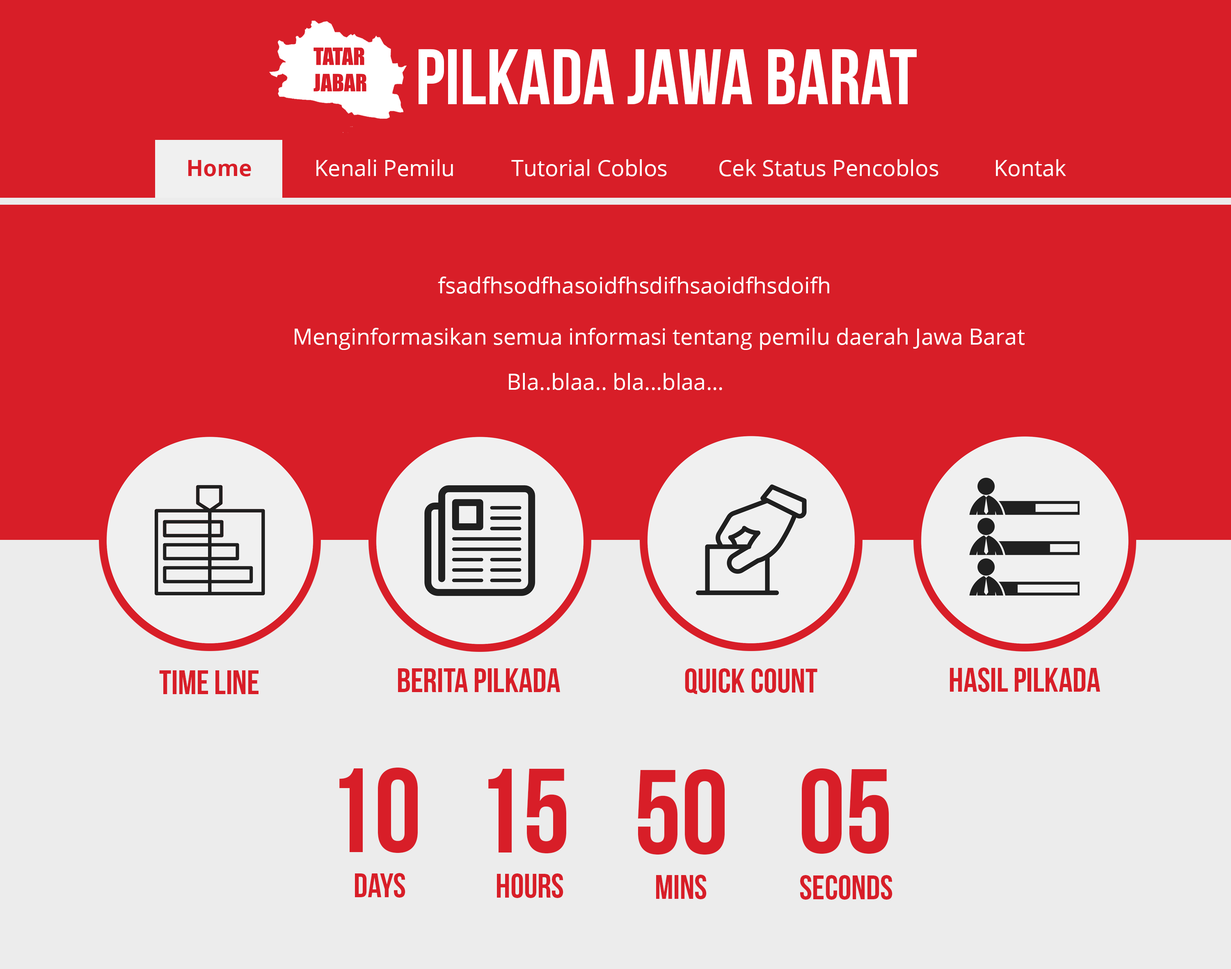
<style>
.page{position:relative;width:1231px;height:969px;background:#d81e28}
.page>*{position:absolute;margin:0}
.t1{font:78.6px "BebasNeue";color:#ffffff}
.t2{font:22.2px "OpenSans-Regular";color:#ffffff}
.t3{font:22.2px "OpenSans-Bold";color:#d81e28}
.t4{font:34.2px "BebasNeue";color:#d81e28}
.t5{font:119.6px "BebasNeue";color:#d81e28}
</style>
<div class="page">
<p class="t1" style="left:418px;top:49px;width:498px;height:56px">pilkada jawa barat</p>
<p class="t2" style="left:188px;top:159px;width:878px;height:17px"><span class="t3">Home       </span>Kenali Pemilu      Tutorial Coblos      Cek Status Pencoblos      Kontak</p>
<p class="t2" style="left:438px;top:276px;width:391px;height:18px">fsadfhsodfhasoidfhsdifhsaoidfhsdoifh</p>
<p class="t2" style="left:295px;top:328px;width:729px;height:22px">Menginformasikan semua informasi tentang pemilu daerah Jawa Barat</p>
<p class="t2" style="left:509px;top:373px;width:213px;height:17px">Bla..blaa.. bla...blaa...</p>
<p class="t4" style="left:159px;top:670px;width:99px;height:24px">Time Line</p>
<p class="t4" style="left:398px;top:668px;width:162px;height:24px">Berita pilkada</p>
<p class="t4" style="left:685px;top:668px;width:132px;height:26px">quick count</p>
<p class="t4" style="left:950px;top:667px;width:150px;height:25px">hasil pilkada</p>
<p class="t5" style="left:339px;top:767px;width:79px;height:86px">10</p>
<p class="t5" style="left:488px;top:768px;width:78px;height:86px">15</p>
<p class="t5" style="left:638px;top:769px;width:86px;height:86px">50</p>
<p class="t5" style="left:802px;top:768px;width:87px;height:86px">05</p>
<p class="t4" style="left:355px;top:873px;width:50px;height:25px">Days</p>
<p class="t4" style="left:497px;top:873px;width:66px;height:25px">hours</p>
<p class="t4" style="left:656px;top:875px;width:50px;height:24px">mins</p>
<p class="t4" style="left:800px;top:875px;width:92px;height:25px">seconds</p>
</div>
